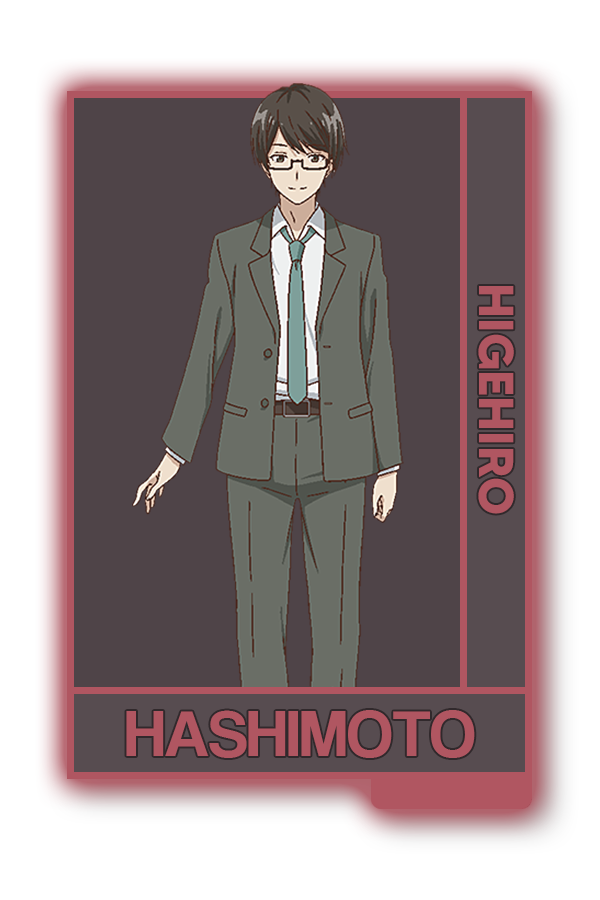
<style>
.page{position:relative;width:600px;height:900px;background:#4f4448}
.page>*{position:absolute;margin:0}
.t1{font:48.8px "MADETOMMY-Bold";color:#b05661}
.t2{font:68.1px "CoolveticaRg-Regular";color:#b05661}
</style>
<div class="page">
<p class="t1" style="left:478px;top:286px;width:36px;height:228px;rotate:90deg">HIGEHIRO</p>
<p class="t2" style="left:126px;top:710px;width:349px;height:48px">HASHIMOTO</p>
</div>
